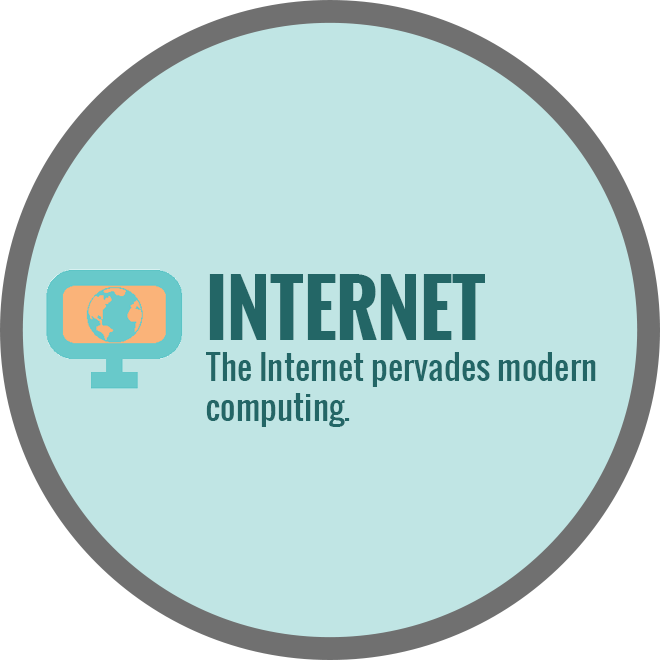
<style>
.page{position:relative;width:660px;height:660px;background:#c0e5e4}
.page>*{position:absolute;margin:0}
.t1{font:75px "Oswald-Bold";color:#236666}
.t2{font:33.3px "Oswald-Regular";color:#236666}
</style>
<div class="page">
<p class="t1" style="left:209px;top:274px;width:276px;height:66px">INTERNET</p>
<p class="t2" style="left:206px;top:352px;width:390px;height:75px">The Internet pervades modern<br>computing.</p>
</div>
